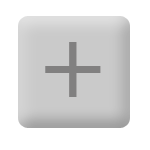
<style>
.page{position:relative;width:150px;height:150px;background:#ffffff}
.page>*{position:absolute;margin:0}
.t1{font:90px "Verdana";color:#818080}
</style>
<div class="page">
<p class="t1" style="left:45px;top:42px;width:56px;height:55px">+</p>
</div>
